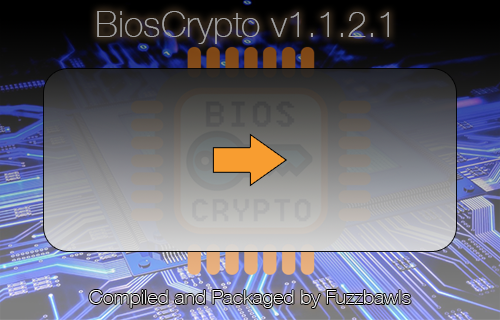
<style>
.page{position:relative;width:500px;height:320px}
.page>*{position:absolute;margin:0}
.t1{font:36px "HelveticaNeue-Thin";color:#a3a3a3}
.t2{font:20px "HelveticaNeue-Thin";color:#ffffff}
</style>
<div class="page">
<p class="t1" style="left:97px;top:11px;width:292px;height:33px">BiosCrypto v1.1.2.1</p>
<p class="t2" style="left:89px;top:290px;width:322px;height:18px">Compiled and Packaged by Fuzzbawls</p>
</div>
